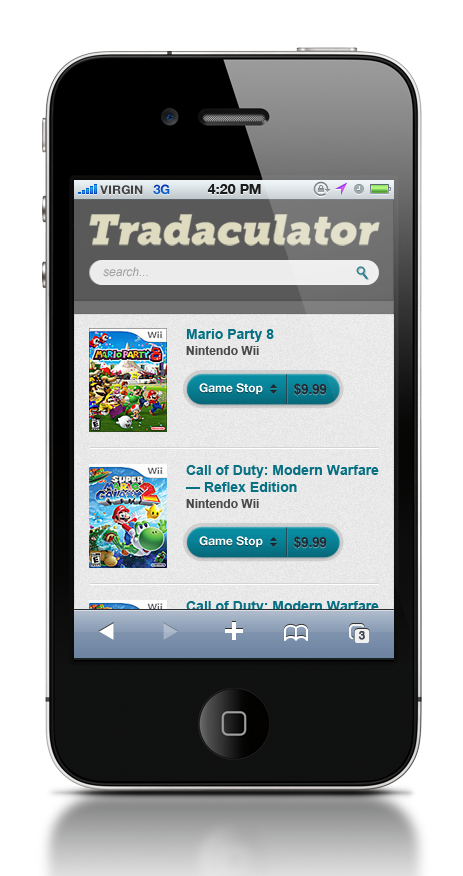
<style>
.page{position:relative;width:463px;height:876px;background:#ffffff}
.page>*{position:absolute;margin:0}
.t1{font:12px "HelveticaNeue-Bold";color:#404040;text-transform:uppercase}
.t2{font:13px "HelveticaNeue-Bold";color:#0c54c5;text-transform:uppercase}
.t3{font:14px "HelveticaNeue-Bold";color:#1a1b1b;text-transform:uppercase}
.t4{font:12px "Arial-ItalicMT";color:#9c9c9c}
.t5{font:14px "Arial-BoldMT";color:#077083}
.t6{font:12px "Arial-BoldMT";color:#49494a}
.t7{font:12px "HelveticaNeue-Bold";color:#ffffff}
.t8{font:13.8px "Arial-BoldMT";letter-spacing:-0.025em;color:#252a32;text-transform:uppercase}
.t9{font:14px "Arial-BoldMT"}
.t10{font:12px "Arial-BoldMT"}
.t11{font:11px "HelveticaNeue";color:#40474f;font-weight:bold}
</style>
<div class="page">
<p class="t1" style="left:100px;top:185px;width:43px;height:10px">VIRGIN</p>
<p class="t2" style="left:153px;top:184px;width:17px;height:11px">3G</p>
<p class="t3" style="left:207px;top:184px;width:54px;height:10px">4:20 PM</p>
<p class="t4" style="left:103px;top:267px;width:45px;height:10px">search...</p>
<p class="t5" style="left:186px;top:329px;width:88px;height:26px">Mario Party 8<br><span class="t6">Nintendo Wii</span></p>
<p class="t7" style="left:199px;top:383px;width:64px;height:12px">Game Stop</p>
<p class="t8" style="left:294px;top:383px;width:33px;height:13px">$9.99</p>
<p class="t5" style="left:185px;top:465px;width:194px;height:43px">Call of Duty: Modern Warfare — Reflex Edition<br><span class="t6">Nintendo Wii</span></p>
<p class="t7" style="left:199px;top:536px;width:64px;height:12px">Game Stop</p>
<p class="t8" style="left:294px;top:536px;width:33px;height:13px">$9.99</p>
<p class="t9" style="left:185px;top:601px;width:194px;height:43px">Call of Duty: Modern Warfare — Reflex Edition<br><span class="t10">Nintendo Wii</span></p>
<p class="t11" style="left:358px;top:631px;width:7px;height:9px">3</p>
</div>
